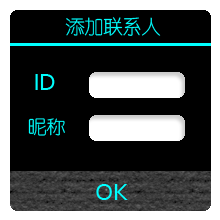
<style>
.page{position:relative;width:220px;height:220px;background:#000000}
.page>*{position:absolute;margin:0}
.t1{font:19.5px "YouYuan";letter-spacing:-0.025em;color:#00ffff}
.t2{font:25.4px "Corbel";letter-spacing:-0.025em;color:#00ffff}
.t3{font:18.8px "YouYuan";letter-spacing:-0.025em;color:#00ffff}
.t4{font:25.5px "Corbel";letter-spacing:-0.025em;color:#00ffff}
</style>
<div class="page">
<p class="t1" style="left:65px;top:17px;width:96px;height:19px">添加联系人</p>
<p class="t2" style="left:35px;top:74px;width:20px;height:16px">ID</p>
<p class="t3" style="left:28px;top:118px;width:37px;height:18px">昵称</p>
<p class="t4" style="left:96px;top:184px;width:32px;height:16px">OK</p>
</div>
